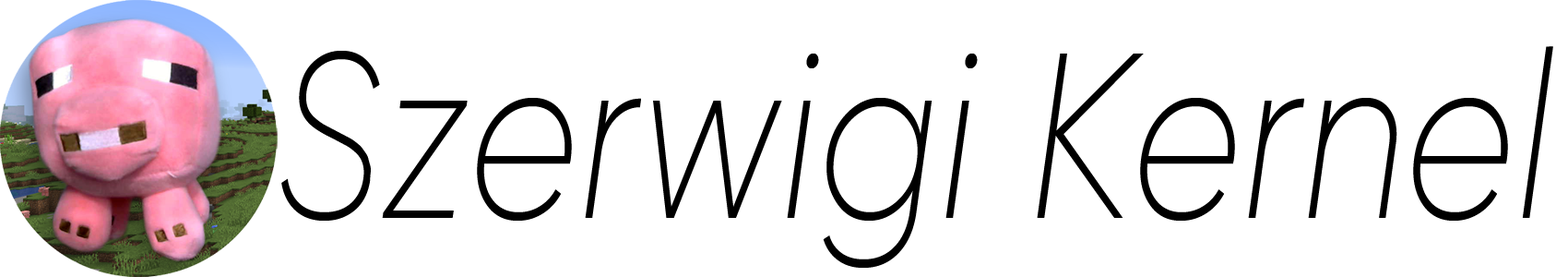
<style>
.page{position:relative;width:1568px;height:277px;background:#ffffff}
.page>*{position:absolute;margin:0}
.t1{font:234.7px "Gilroy-UltraLightItalic";color:#000000;scale:0.79 1}
</style>
<div class="page">
<p class="t1" style="left:281px;top:46px;width:1272px;height:221px">Szerwigi Kernel</p>
</div>
